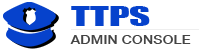
<style>
.page{position:relative;width:200px;height:50px;background:#ffffff}
.page>*{position:absolute;margin:0}
.t1{font:25.1px "Impact";color:#0642cc;scale:1.64 1}
.t2{font:12px "HelveticaNeue-Medium";color:#444444;scale:1.2 1}
</style>
<div class="page">
<p class="t1" style="left:71px;top:6px;width:79px;height:20px">TTPS</p>
<p class="t2" style="left:70px;top:35px;width:121px;height:9px">ADMIN CONSOLE</p>
</div>
